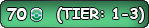
<style>
.page{position:relative;width:149px;height:28px}
.page>*{position:absolute;margin:0}
.t1{font:12px "ComicSansMS-Bold";color:#ffffff}
.t2{font:14.7px "ComicSansMS-Bold";color:#ffffff}
</style>
<div class="page">
<p class="t1" style="left:7px;top:8px;width:20px;height:12px">70</p>
<p class="t2" style="left:57px;top:7px;width:87px;height:16px">(TIER: 1-3)</p>
</div>
